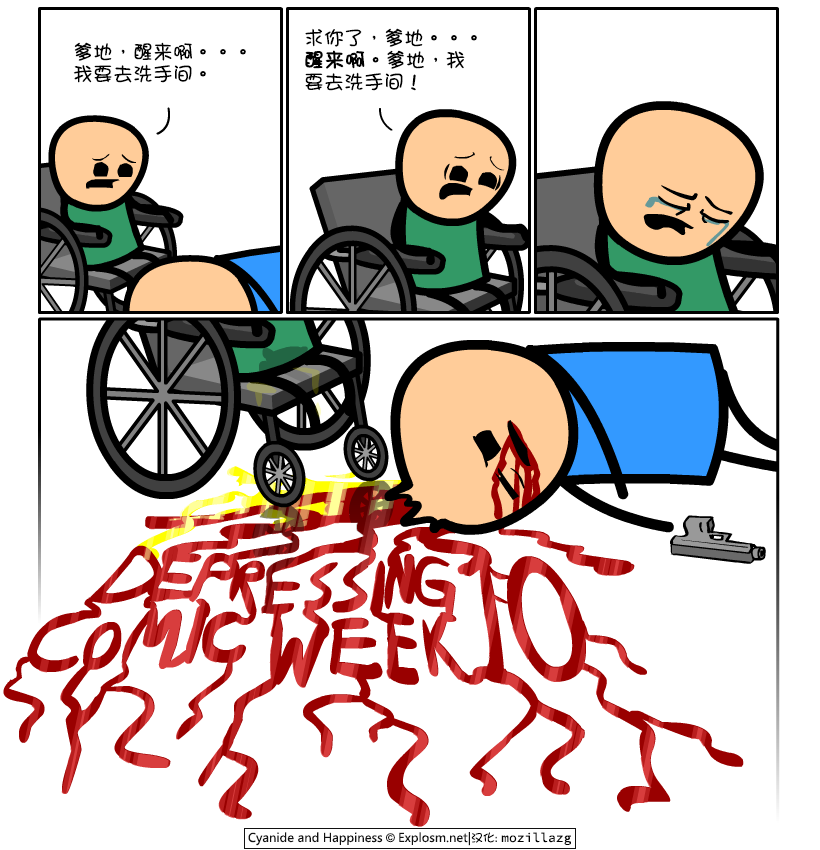
<style>
.page{position:relative;width:820px;height:850px;background:#ffffff}
.page>*{position:absolute;margin:0}
.t1{font:20px/22px "DFGirl";color:#000000}
.t2{font:20px/22px "DFGirl";color:#000000;font-weight:bold}
</style>
<div class="page">
<p class="t1" style="left:305px;top:28px;width:172px;height:63px">求你了，爹地。。。<br><span class="t2">醒来啊</span>。爹地，我<br>要去洗手间！</p>
<p class="t1" style="left:73px;top:42px;width:173px;height:41px">爹地，醒来啊。。。<br>我要去洗手间。</p>
</div>
